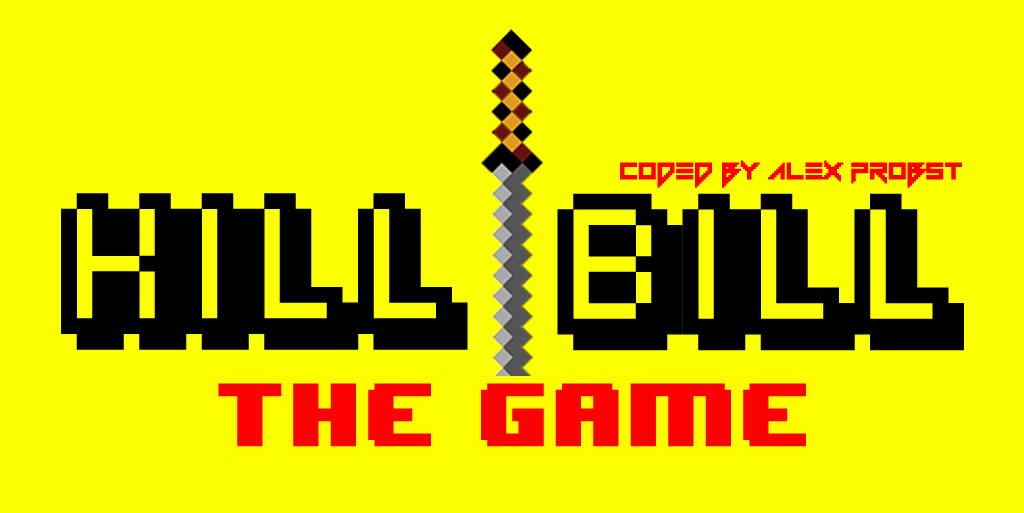
<style>
.page{position:relative;width:1024px;height:513px;background:#fcff00}
.page>*{position:absolute;margin:0}
.t1{font:33.3px "Vermin-Vibes-1989";color:#ff0000}
.t2{font:125px "Fipps-Regular";color:#000000}
.t3{font:75px "8BITWONDERNominal";color:#fc0101}
</style>
<div class="page">
<p class="t1" style="left:620px;top:160px;width:342px;height:28px">Coded by Alex Probst</p>
<p class="t2" style="left:61px;top:193px;width:407px;height:157px">KILL</p>
<p class="t2" style="left:557px;top:193px;width:407px;height:158px">BILL</p>
<p class="t3" style="left:218px;top:383px;width:588px;height:64px">The Game</p>
</div>
